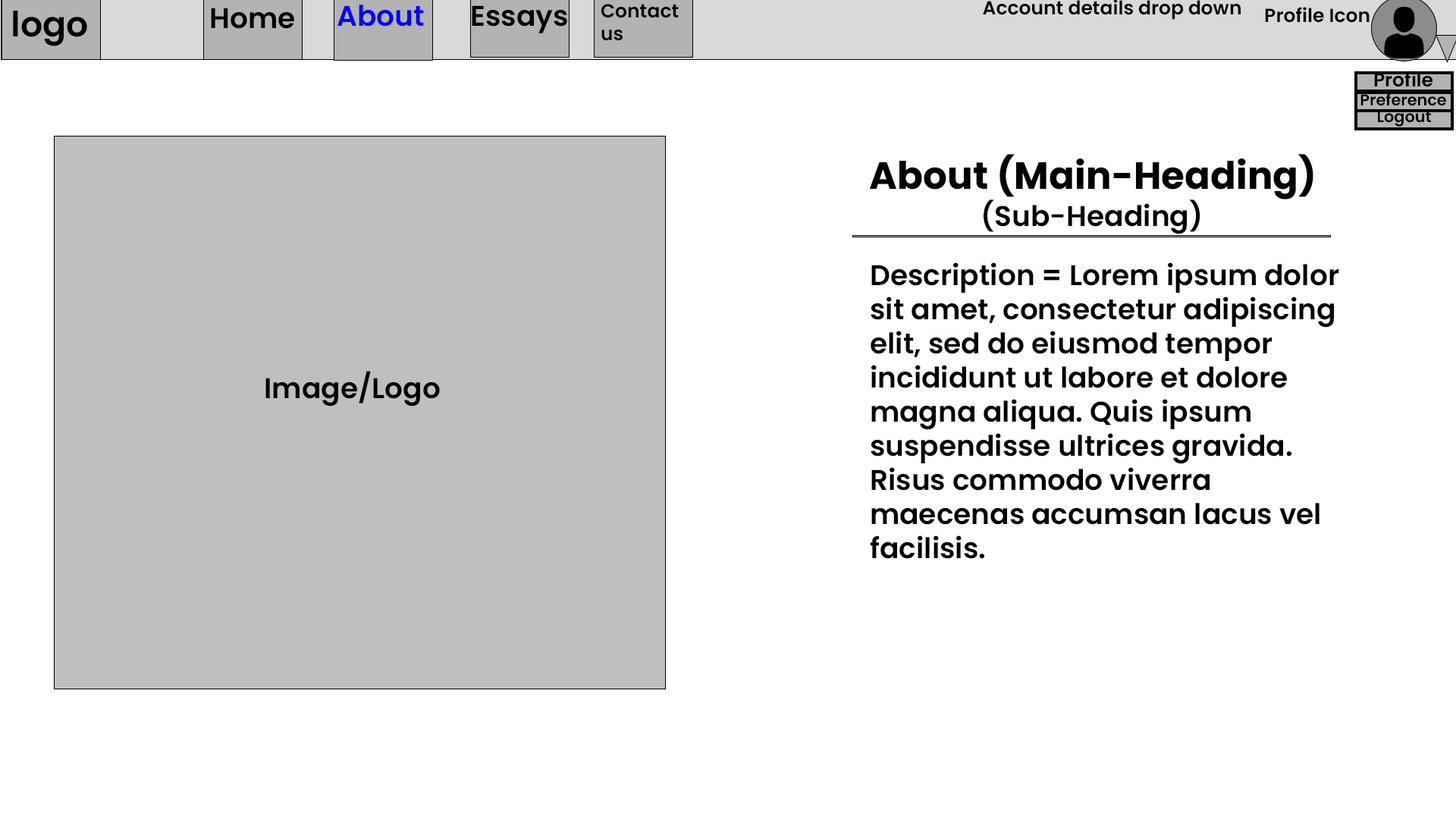
<style>
.page{position:relative;width:1456px;height:819px;background:#ffffff}
.page>*{position:absolute;margin:0}
.t1{font:28.4px "Poppins-SemiBold";color:#0000ff}
.t2{font:28.4px "Poppins-SemiBold";color:#000000}
.t3{font:19px "Poppins-SemiBold";color:#000000}
.t4{font:34.8px "Poppins-SemiBold";color:#000000}
.t5{font:15.8px "Poppins-SemiBold";color:#000000}
.t6{font:37.9px "Poppins-Bold";color:#000000}
</style>
<div class="page">
<p class="t1" style="left:337px;top:5px;width:87px;height:22px">About</p>
<p class="t2" style="left:472px;top:5px;width:95px;height:28px">Essays</p>
<p class="t3" style="left:601px;top:4px;width:78px;height:37px">Contact us</p>
<p class="t3" style="left:983px;top:0px;width:258px;height:20px">Account details drop down</p>
<p class="t4" style="left:13px;top:11px;width:74px;height:35px">logo</p>
<p class="t2" style="left:211px;top:8px;width:83px;height:21px">Home</p>
<p class="t3" style="left:1265px;top:7px;width:105px;height:16px">Profile Icon</p>
<p class="t3" style="left:1374px;top:71px;width:58px;height:16px">Profile</p>
<p class="t5" style="left:1360px;top:93px;width:86px;height:13px">Preference</p>
<p class="t5" style="left:1378px;top:111px;width:53px;height:16px">Logout</p>
<p class="t6" style="left:869px;top:154px;width:444px;height:45px">About (Main-Heading)</p>
<p class="t2" style="left:984px;top:199px;width:216px;height:35px">(Sub-Heading)</p>
<p class="t2" style="left:870px;top:262px;width:469px;height:297px">Description = Lorem ipsum dolor sit amet, consectetur adipiscing elit, sed do eiusmod tempor incididunt ut labore et dolore magna aliqua. Quis ipsum suspendisse ultrices gravida. Risus commodo viverra maecenas accumsan lacus vel facilisis.</p>
<p class="t2" style="left:265px;top:371px;width:175px;height:35px">Image/Logo</p>
</div>
